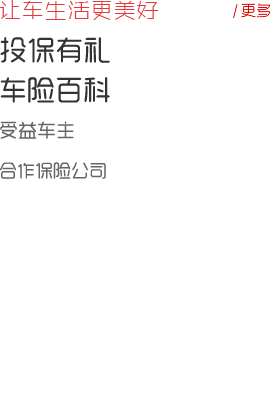
<style>
.page{position:relative;width:272px;height:400px;background:#ffffff}
.page>*{position:absolute;margin:0}
.t1{font:23px "ZHSRXT--GBK1-0";color:#e3393b}
.t2{font:15px "MFYueHei_Noncommercial-ExLight";color:#dd0400}
.t3{font:28px "MFYueYuan_Noncommercial-Regular";color:#333333}
.t4{font:19px "MFYueYuan_Noncommercial-Regular";color:#666666}
.t5{font:18px "MFYueYuan_Noncommercial-Regular";color:#666666}
</style>
<div class="page">
<p class="t1" style="left:0px;top:0px;width:159px;height:20px">让车生活更美好</p>
<p class="t2" style="left:233px;top:3px;width:37px;height:15px">/ 更多</p>
<p class="t3" style="left:0px;top:37px;width:110px;height:26px">投保有礼</p>
<p class="t3" style="left:0px;top:77px;width:110px;height:26px">车险百科</p>
<p class="t4" style="left:0px;top:121px;width:74px;height:18px">受益车主</p>
<p class="t5" style="left:0px;top:162px;width:106px;height:17px">合作保险公司</p>
</div>
